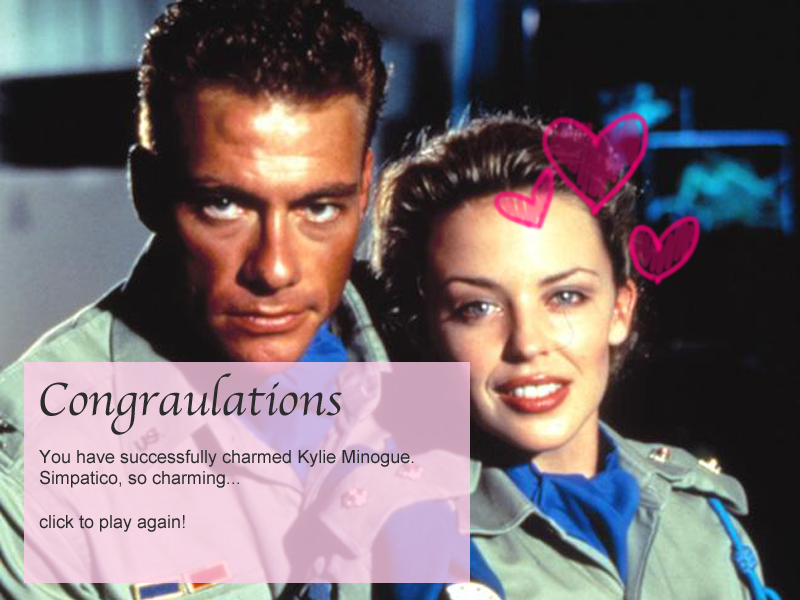
<style>
.page{position:relative;width:800px;height:600px}
.page>*{position:absolute;margin:0}
.t1{font:48px "Apple-Chancery";color:#2c2c2c}
.t2{font:18px "ArialMT";color:#2c2c2c}
</style>
<div class="page">
<p class="t1" style="left:40px;top:373px;width:302px;height:62px">Congraulations</p>
<p class="t2" style="left:39px;top:449px;width:375px;height:83px">You have successfully charmed Kylie Minogue. Simpatico, so charming...<br><br>click to play again!</p>
</div>
